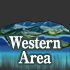
<style>
.page{position:relative;width:70px;height:70px;background:#333333}
.page>*{position:absolute;margin:0}
.t1{font:16px/15px "RyuminPro-ExBold";letter-spacing:-0.04em;color:#ffffff;scale:0.9 1}
</style>
<div class="page">
<p class="t1" style="left:9px;top:36px;width:52px;height:28px;text-align:center">Western<br>Area</p>
</div>
